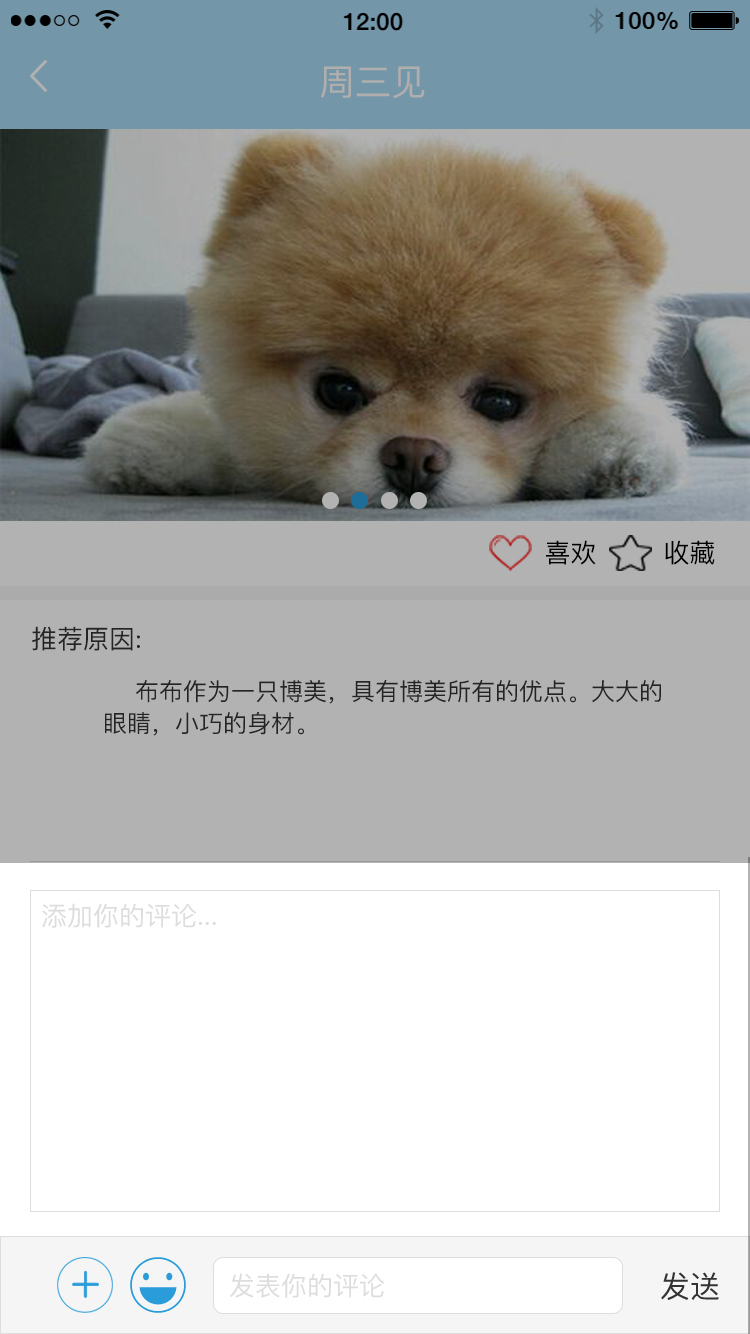
<style>
.page{position:relative;width:750px;height:1334px;background:#ffffff}
.page>*{position:absolute;margin:0}
.t1{font:36px "PingFangSC-Regular";color:#b1aeae}
.t2{font:26px "PingFangSC-Regular";color:#000000}
.t3{font:26px "PingFangSC-Regular";color:#333333}
.t4{font:24px/32px "PingFangSC-Regular";color:#333333}
.t5{font:26px "PingFangSC";color:#dddddd}
.t6{font:30px "PingFangSC";color:#333333}
</style>
<div class="page">
<p class="t1" style="left:321px;top:66px;width:104px;height:33px">周三见</p>
<p class="t2" style="left:546px;top:540px;width:50px;height:25px">喜欢</p>
<p class="t2" style="left:665px;top:540px;width:50px;height:25px">收藏</p>
<p class="t3" style="left:32px;top:626px;width:108px;height:25px">推荐原因:</p>
<p class="t4" style="left:105px;top:680px;width:556px;height:56px">布布作为一只博美，具有博美所有的优点。大大的<br>眼睛，小巧的身材。</p>
<p class="t5" style="left:42px;top:903px;width:174px;height:25px">添加你的评论...</p>
<p class="t5" style="left:230px;top:1273px;width:155px;height:25px">发表你的评论</p>
<p class="t6" style="left:661px;top:1272px;width:58px;height:28px">发送</p>
</div>
